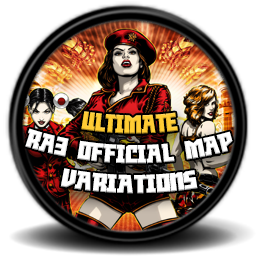
<style>
.page{position:relative;width:256px;height:256px;background:#ffffff}
.page>*{position:absolute;margin:0}
.t1{font:24.9px "RedAlert";color:#ffffff}
.t2{font:24.9px "RedAlert";color:#ffcc33}
</style>
<div class="page">
<p class="t1" style="left:25px;top:111px;width:208px;height:83px;text-align:center"><span class="t2">ULTIMATE<br></span>RA3 OFFICIAL MAP VARIATIONS</p>
</div>
